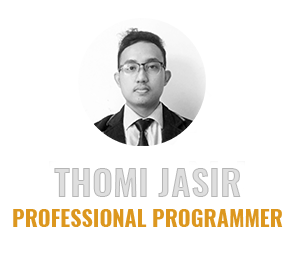
<style>
.page{position:relative;width:295px;height:258px;background:#ffffff}
.page>*{position:absolute;margin:0}
.t1{font:36px "Oswald-Bold";color:#dedede}
.t2{font:22px "Oswald-Bold";color:#dc971f}
</style>
<div class="page">
<p class="t1" style="left:54px;top:168px;width:187px;height:29px">THOMI JASIR</p>
<p class="t2" style="left:13px;top:209px;width:270px;height:18px">PROFESSIONAL PROGRAMMER</p>
</div>
